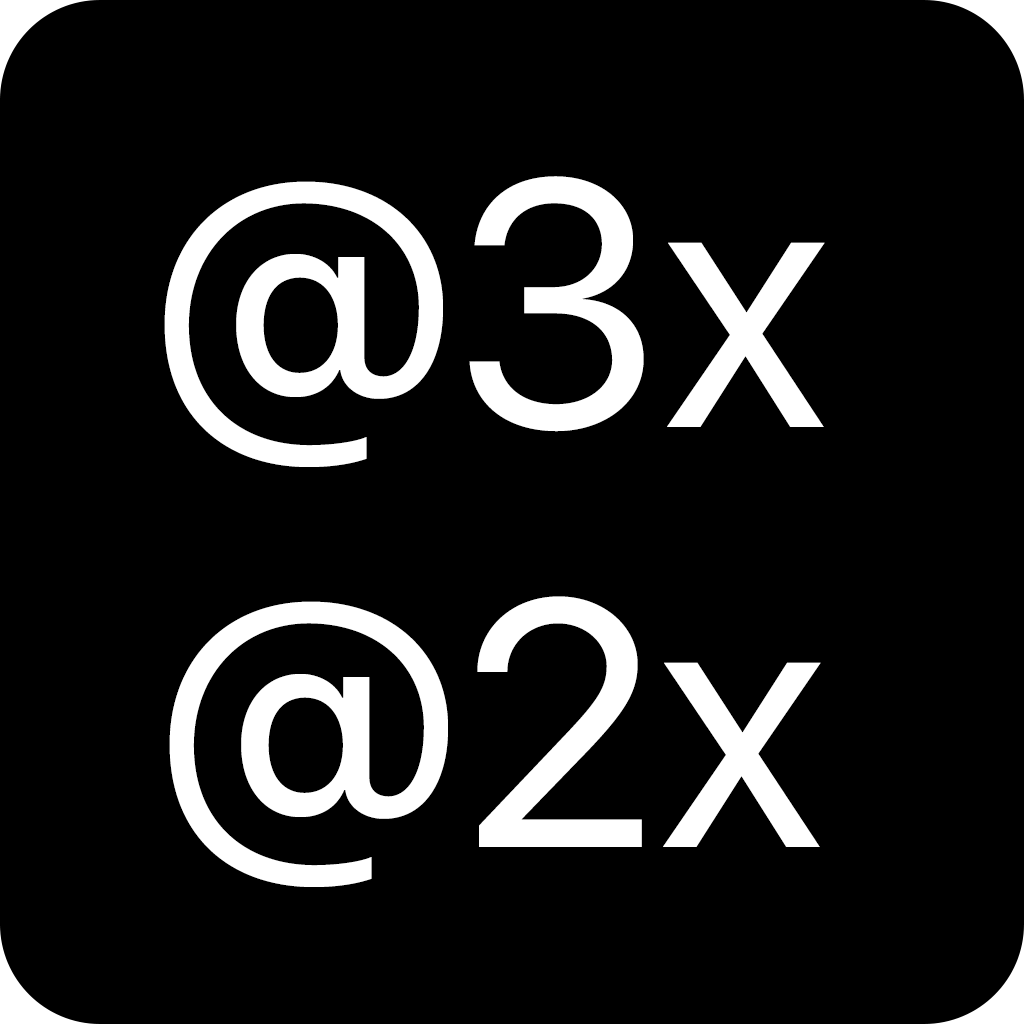
<style>
.page{position:relative;width:1024px;height:1024px;background:#000000}
.page>*{position:absolute;margin:0}
.t1{font:350px "SFUIDisplay-Regular";color:#ffffff}
</style>
<div class="page">
<p class="t1" style="left:164px;top:176px;width:661px;height:711px;text-align:center">@3x<br>@2x</p>
</div>
